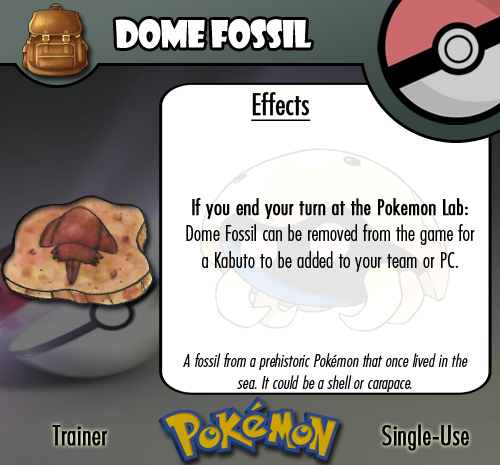
<style>
.page{position:relative;width:500px;height:465px;background:#ffffff}
.page>*{position:absolute;margin:0}
.t1{font:36.7px "ShowcardGothic-Reg";letter-spacing:-0.025em;color:#ffffff;scale:0.91 1}
.t2{font:22.2px "FuturaCondensedBQ-Light";color:#010101}
.t3{font:27.8px "FuturaCondensedBQ-Light";color:#010101;font-weight:bold}
.t4{font:30.6px "FuturaCondensedBQ-Light";color:#010101;font-weight:bold;text-decoration:underline}
.t5{font:22.2px "FuturaCondensedBQ-Light";color:#010101;font-weight:bold}
.t6{font:18.1px "FuturaCondensedBQ-Light";color:#010101;font-style:italic}
</style>
<div class="page">
<p class="t1" style="left:115px;top:19px;width:197px;height:30px">Dome Fossil</p>
<p class="t2" style="left:186px;top:92px;width:289px;height:180px"><span class="t3">  </span><span class="t4">Effects<br><br><br><br><br><br></span><span class="t5">If you end your turn at the Pokemon Lab: </span>Dome Fossil can be removed from the game for a Kabuto to be added to your team or PC.</p>
<p class="t6" style="left:183px;top:353px;width:285px;height:39px;text-align:center">A fossil from a prehistoric Pokémon that once lived in the sea. It could be a shell or carapace.</p>
<p class="t3" style="left:52px;top:425px;width:55px;height:21px">Trainer</p>
<p class="t3" style="left:382px;top:424px;width:87px;height:27px">Single-Use</p>
</div>
